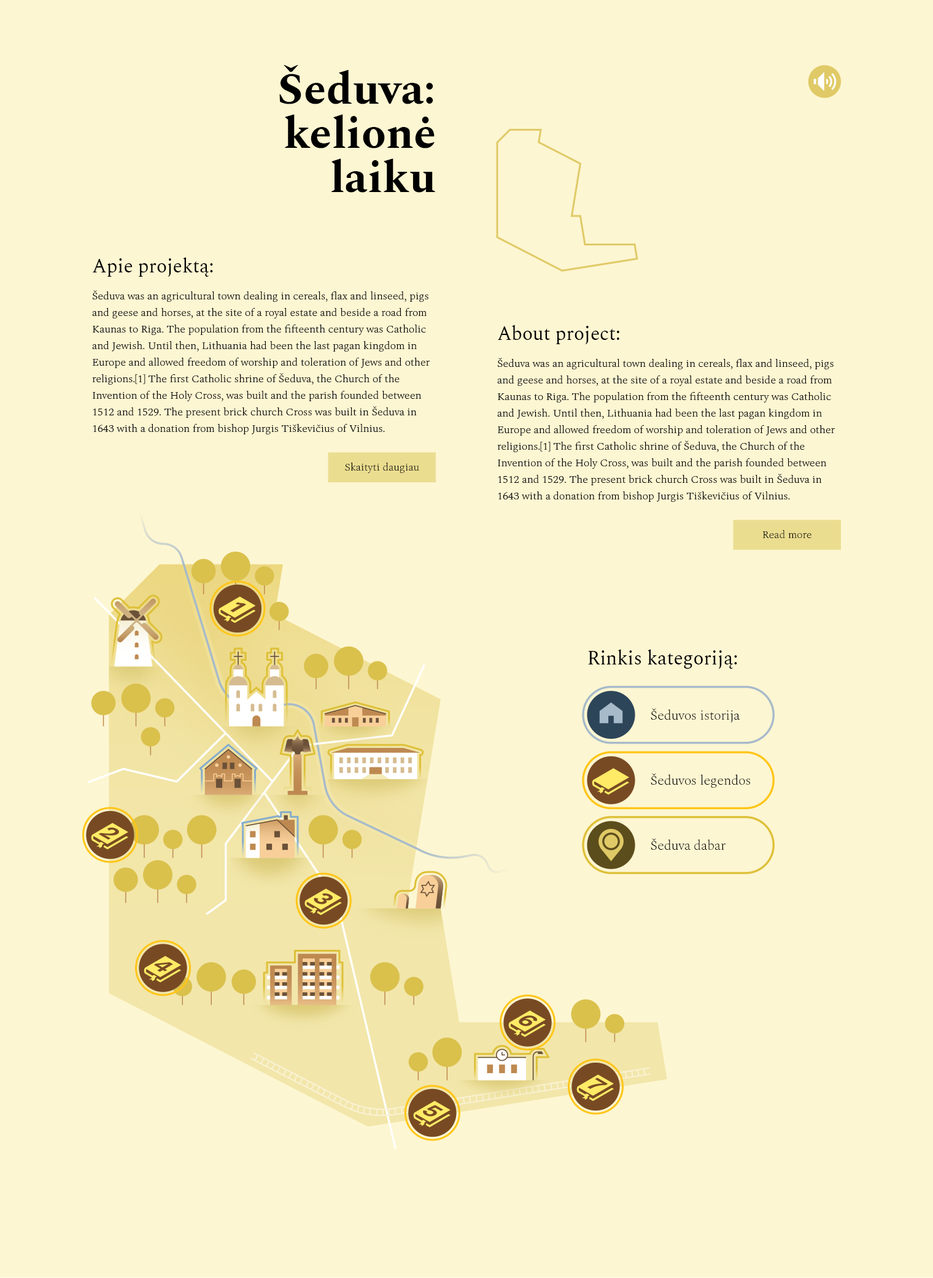
<style>
.page{position:relative;width:933px;height:1278px;background:#fdf6d2}
.page>*{position:absolute;margin:0}
.t1{font:44.8px/44.2px "Spectral-Bold";color:#000000}
.t2{font:19.3px "Spectral-Regular";color:#000000}
.t3{font:11px/16.6px "Spectral-ExtraLight";color:#000000}
.t4{font:11px "Spectral-ExtraLight";color:#000000}
.t5{font:13.5px "Spectral-ExtraLight";color:#000000}
</style>
<div class="page">
<p class="t1" style="left:279px;top:65px;width:156px;height:128px;text-align:right">Šeduva:<br>kelionė<br>laiku</p>
<p class="t2" style="left:93px;top:257px;width:120px;height:20px">Apie projektą:</p>
<p class="t3" style="left:92px;top:290px;width:338px;height:144px">Šeduva was an agricultural town dealing in cereals, flax and linseed, pigs and geese and horses, at the site of a royal estate and beside a road from Kaunas to Riga. The population from the fifteenth century was Catholic and Jewish. Until then, Lithuania had been the last pagan kingdom in Europe and allowed freedom of worship and toleration of Jews and other religions.[1] The first Catholic shrine of Šeduva, the Church of the Invention of the Holy Cross, was built and the parish founded between 1512 and 1529. The present brick church Cross was built in Šeduva in 1643 with a donation from bishop Jurgis Tiškevičius of Vilnius.</p>
<p class="t2" style="left:498px;top:325px;width:121px;height:20px">About project:</p>
<p class="t3" style="left:497px;top:358px;width:338px;height:144px">Šeduva was an agricultural town dealing in cereals, flax and linseed, pigs and geese and horses, at the site of a royal estate and beside a road from Kaunas to Riga. The population from the fifteenth century was Catholic and Jewish. Until then, Lithuania had been the last pagan kingdom in Europe and allowed freedom of worship and toleration of Jews and other religions.[1] The first Catholic shrine of Šeduva, the Church of the Invention of the Holy Cross, was built and the parish founded between 1512 and 1529. The present brick church Cross was built in Šeduva in 1643 with a donation from bishop Jurgis Tiškevičius of Vilnius.</p>
<p class="t4" style="left:345px;top:463px;width:74px;height:10px">Skaityti daugiau</p>
<p class="t4" style="left:762px;top:530px;width:49px;height:8px">Read more</p>
<p class="t2" style="left:588px;top:649px;width:149px;height:21px">Rinkis kategoriją:</p>
<p class="t5" style="left:651px;top:708px;width:89px;height:15px">Šeduvos istorija</p>
<p class="t5" style="left:651px;top:773px;width:99px;height:15px">Šeduvos legendos</p>
<p class="t5" style="left:651px;top:838px;width:74px;height:12px">Šeduva dabar</p>
</div>
